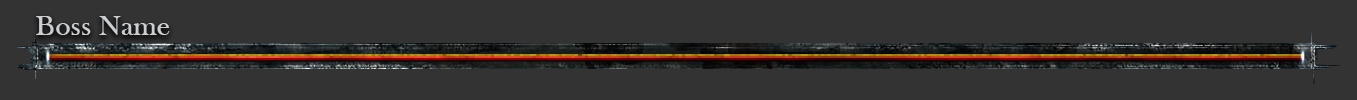
<style>
.page{position:relative;width:1357px;height:100px;background:#333333}
.page>*{position:absolute;margin:0}
.t1{font:29.4px "BaskOldFace";color:#cbcfd1}
</style>
<div class="page">
<p class="t1" style="left:36px;top:16px;width:134px;height:19px">Boss Name</p>
</div>
